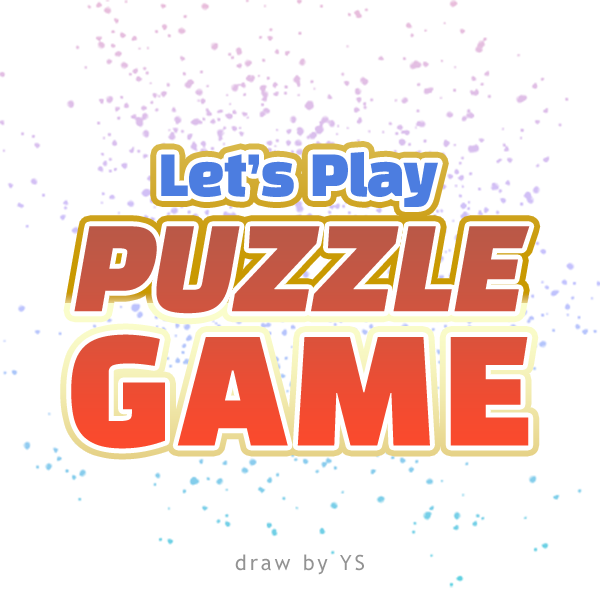
<style>
.page{position:relative;width:600px;height:600px;background:#ffffff}
.page>*{position:absolute;margin:0}
.t1{font:55.3px "BlackHanSans-Regular";letter-spacing:-0.02em;color:#4c7de0}
.t2{font:112.7px/109.5px "BlackHanSans-Regular";letter-spacing:-0.005em;text-transform:uppercase;font-style:italic}
.t3{font:144.6px/109.5px "BlackHanSans-Regular";letter-spacing:0.055em;text-transform:uppercase}
.t4{font:21px "TrebuchetMS";letter-spacing:0.14em;color:#939393}
</style>
<div class="page">
<p class="t1" style="left:161px;top:152px;width:277px;height:55px">Let’s Play</p>
<p class="t2" style="left:71px;top:226px;width:459px;height:223px">Puzzle<br><span class="t3">Game</span></p>
<p class="t4" style="left:235px;top:554px;width:129px;height:21px">draw by YS</p>
</div>
